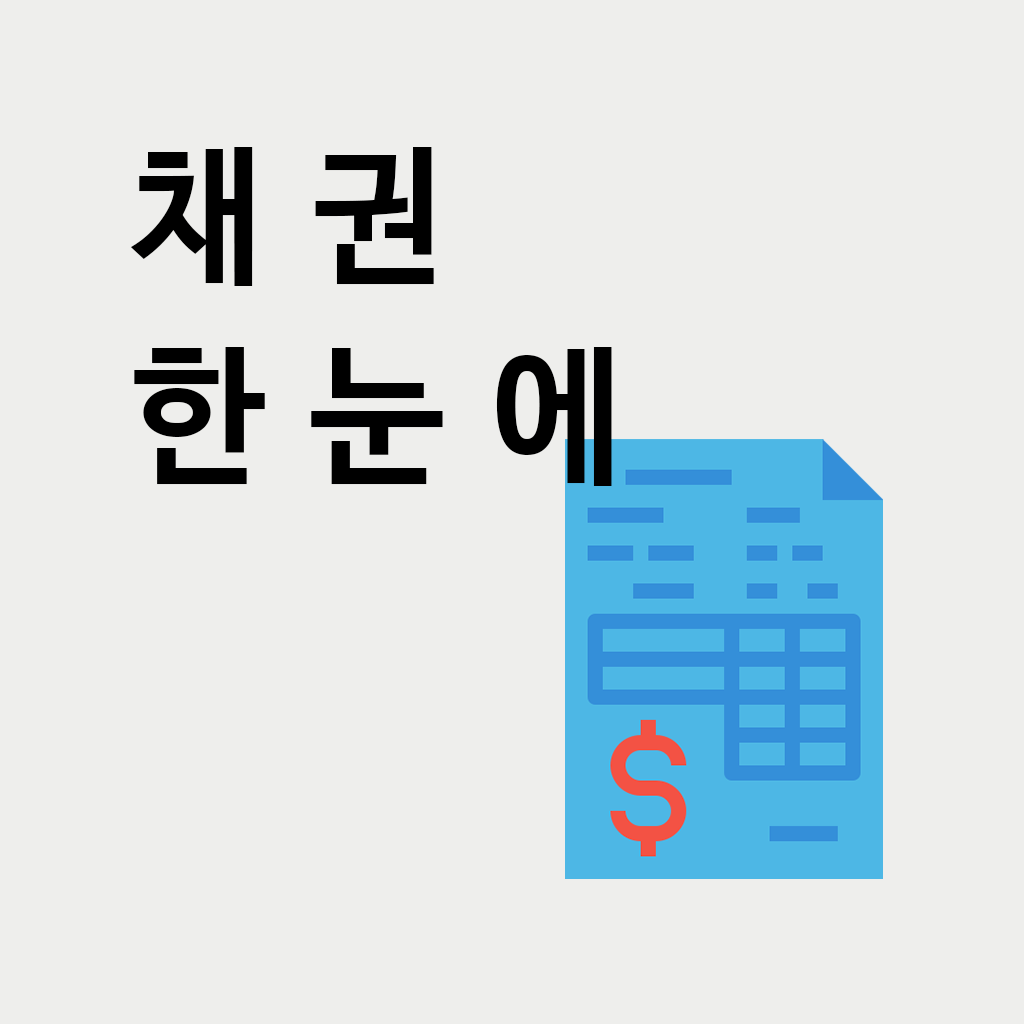
<style>
.page{position:relative;width:1024px;height:1024px;background:#eeeeec}
.page>*{position:absolute;margin:0}
.t1{font:150px/200px "NanumBarunGothicBold";letter-spacing:0.3em;color:#000000}
</style>
<div class="page">
<p class="t1" style="left:130px;top:147px;width:482px;height:339px">채권<br>한눈에</p>
</div>
